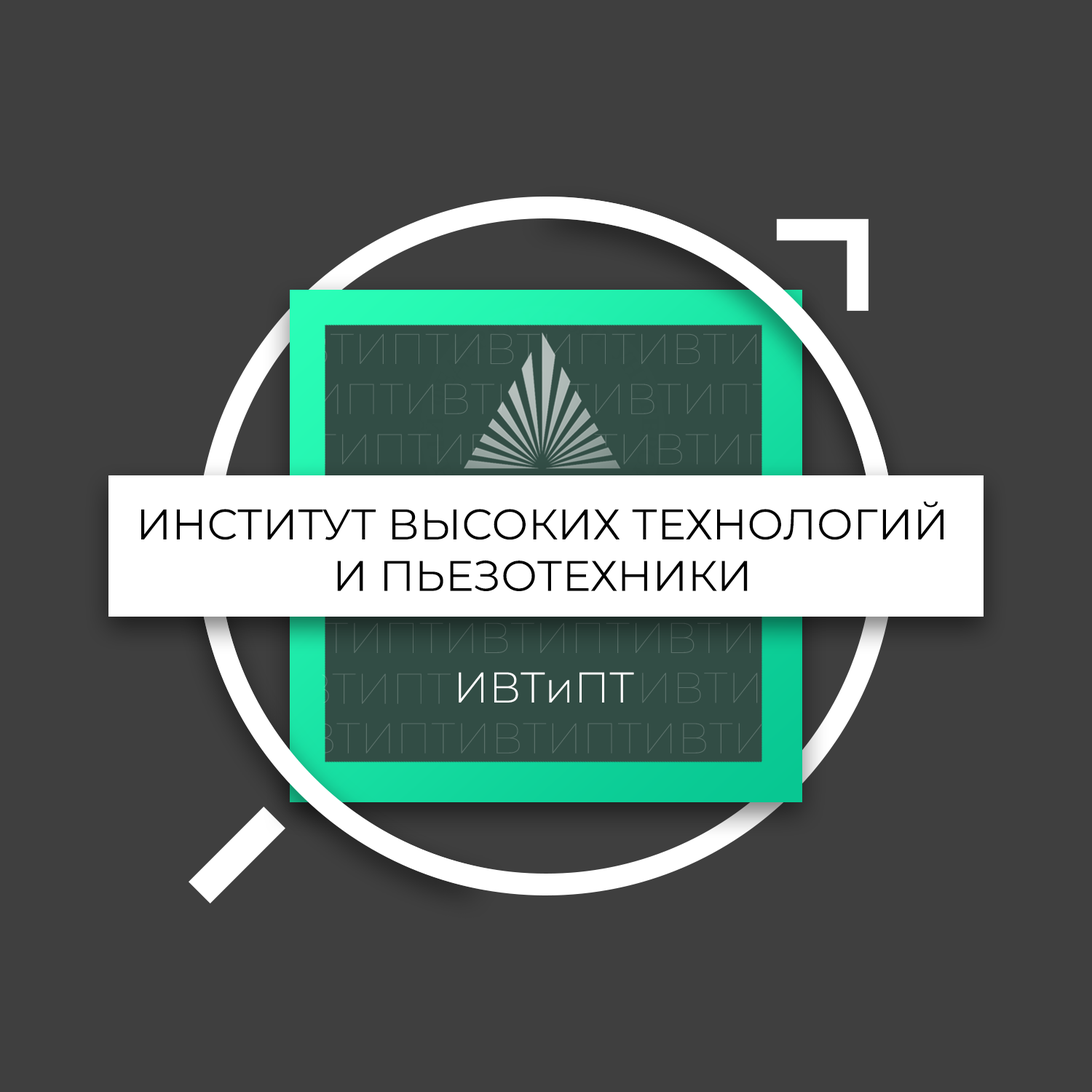
<style>
.page{position:relative;width:1092px;height:1092px;background:#3f3f3f}
.page>*{position:absolute;margin:0}
.t1{font:43px "Montserrat-Regular";color:#000000;text-transform:uppercase}
.t2{font:43px/50.1px "Montserrat-Regular";color:#000000;text-transform:uppercase}
.t3{font:43px "Montserrat-Light";color:#ffffff}
</style>
<div class="page">
<p class="t1" style="left:141px;top:502px;width:802px;height:89px;text-align:center"><span class="t2">Инс</span>титут высоких технологий<br>и пьезотехники</p>
<p class="t3" style="left:459px;top:672px;width:175px;height:31px">ИВТиПТ</p>
</div>
